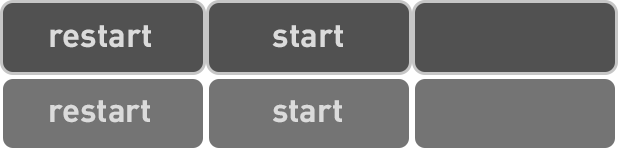
<style>
.page{position:relative;width:618px;height:152px;background:#747474}
.page>*{position:absolute;margin:0}
.t1{font:33px "DIN-BoldAlternate";color:#dbdbdb}
.t2{font:32.9px "DIN-BoldAlternate";color:#dbdbdb}
</style>
<div class="page">
<p class="t1" style="left:50px;top:25px;width:101px;height:23px">restart</p>
<p class="t1" style="left:272px;top:25px;width:71px;height:23px">start</p>
<p class="t2" style="left:50px;top:100px;width:100px;height:23px">restart</p>
<p class="t2" style="left:273px;top:100px;width:69px;height:23px">start</p>
</div>
